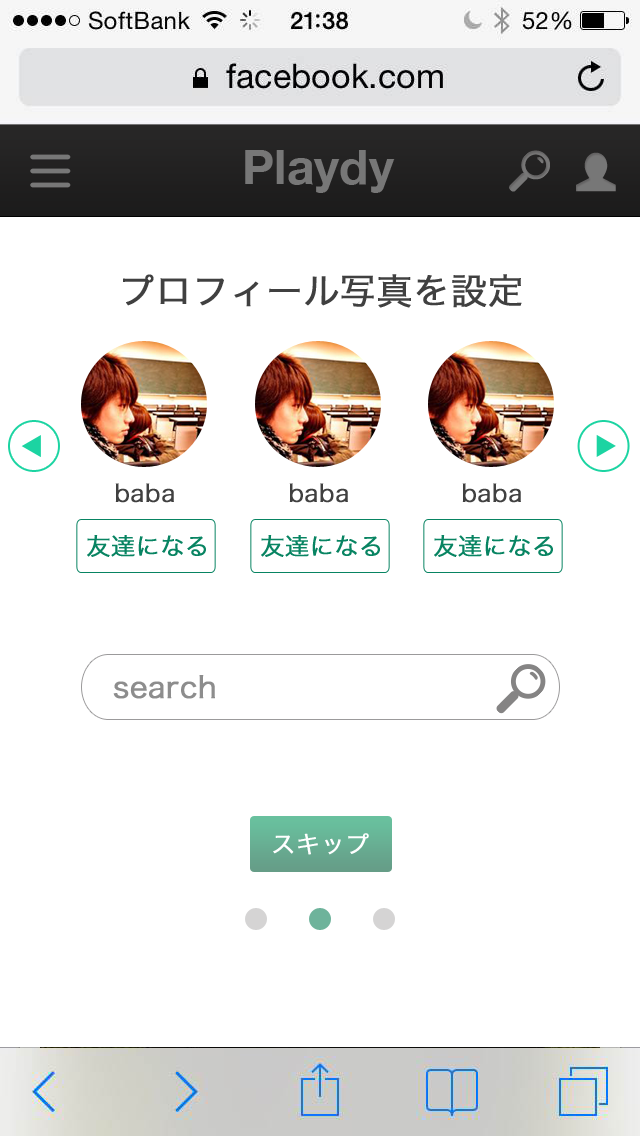
<style>
.page{position:relative;width:640px;height:1136px;background:#ffffff}
.page>*{position:absolute;margin:0}
.t1{font:48px "HelveticaNeue-Bold";color:#777777}
.t2{font:36px "HiraKakuPro-W3";color:#404040;font-weight:bold}
.t3{font:24px "HiraKakuPro-W3";color:#404040;font-weight:bold}
.t4{font:24px "HiraKakuPro-W3";color:#088462;font-weight:bold}
.t5{font:30px "HiraKakuPro-W3";color:#8d8d8d;font-weight:bold}
.t6{font:24px "HiraKakuPro-W3";color:#ffffff;font-weight:bold}
</style>
<div class="page">
<p class="t1" style="left:245px;top:150px;width:150px;height:43px">Playdy</p>
<p class="t2" style="left:123px;top:274px;width:399px;height:34px">プロフィール写真を設定</p>
<p class="t3" style="left:115px;top:483px;width:59px;height:20px">baba</p>
<p class="t3" style="left:289px;top:483px;width:59px;height:20px">baba</p>
<p class="t3" style="left:462px;top:483px;width:59px;height:20px">baba</p>
<p class="t4" style="left:87px;top:535px;width:119px;height:22px">友達になる</p>
<p class="t4" style="left:261px;top:535px;width:119px;height:22px">友達になる</p>
<p class="t4" style="left:434px;top:535px;width:119px;height:22px">友達になる</p>
<p class="t5" style="left:113px;top:675px;width:102px;height:24px">search</p>
<p class="t6" style="left:273px;top:833px;width:96px;height:22px">スキップ</p>
</div>
